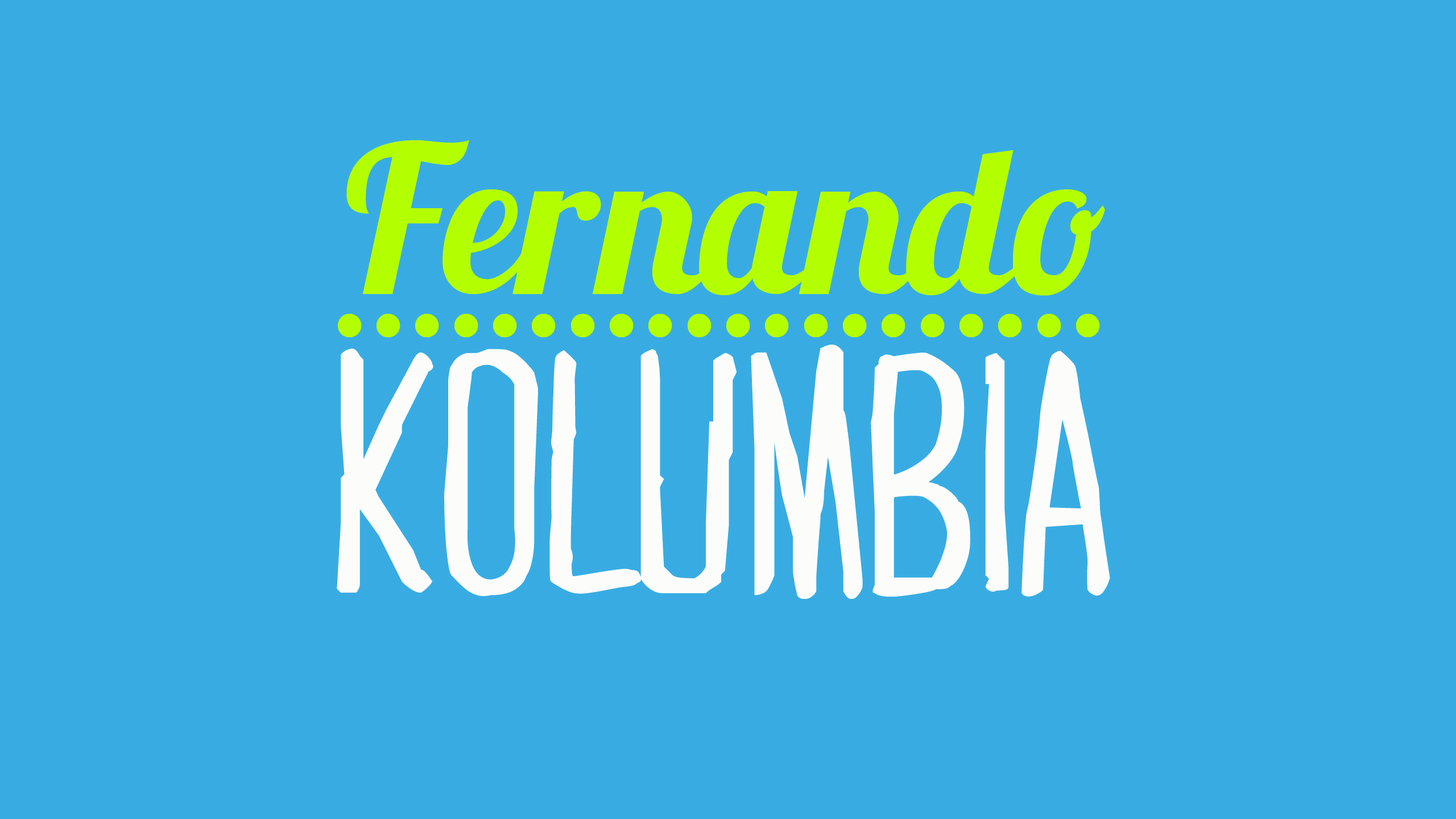
<style>
.page{position:relative;width:1456px;height:819px;background:#38ace2}
.page>*{position:absolute;margin:0}
.t1{font:205.4px "Lobster1.3";color:#b4fe02}
.t2{font:147.8px "Lobster1.3";color:#b4fe02}
.t3{font:323.1px "MARI&DAVID";color:#fcfdfb}
</style>
<div class="page">
<p class="t1" style="left:346px;top:140px;width:759px;height:156px">Fernando</p>
<p class="t2" style="left:338px;top:313px;width:762px;height:24px">....................</p>
<p class="t3" style="left:337px;top:344px;width:773px;height:255px">kolumbia</p>
</div>
